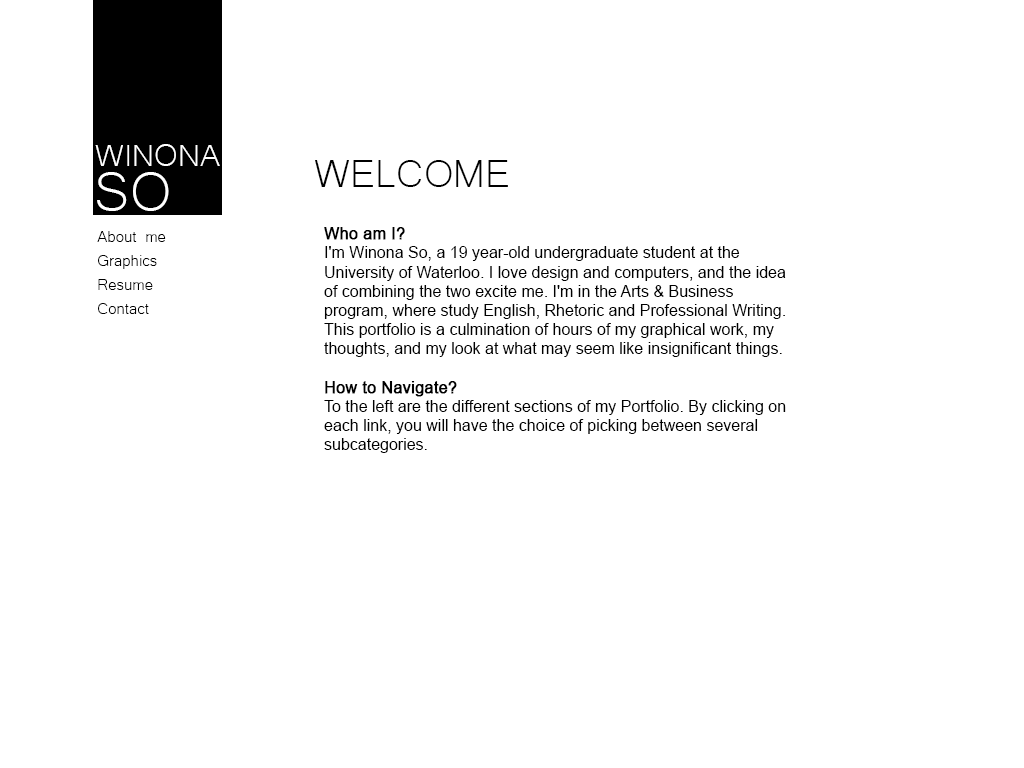
<style>
.page{position:relative;width:1024px;height:768px;background:#ffffff}
.page>*{position:absolute;margin:0}
.t1{font:40px "Microsoft-Yi-Baiti";color:#ffffff}
.t2{font:50px "Microsoft-Yi-Baiti";color:#000000}
.t3{font:70px "Microsoft-Yi-Baiti";color:#ffffff}
.t4{font:20px "Microsoft-Yi-Baiti";color:#000000}
.t5{font:16px "ArialMT";color:#000000}
.t6{font:16px "ArialMT";color:#000000;font-weight:bold}
</style>
<div class="page">
<p class="t1" style="left:95px;top:144px;width:125px;height:22px">WINONA</p>
<p class="t2" style="left:315px;top:160px;width:193px;height:27px">WELCOME</p>
<p class="t3" style="left:97px;top:172px;width:72px;height:39px">SO</p>
<p class="t4" style="left:97px;top:231px;width:69px;height:83px">About me<br>Graphics<br>Resume<br>Contact</p>
<p class="t5" style="left:324px;top:227px;width:462px;height:226px"><span class="t6">Who am I? <br></span>I'm Winona So, a 19 year-old undergraduate student at the University of Waterloo. I love design and computers, and the idea of combining the two excite me. I'm in the Arts &amp; Business program, where study English, Rhetoric and Professional Writing. This portfolio is a culmination of hours of my graphical work, my thoughts, and my look at what may seem like insignificant things.<br><br><span class="t6">How to Navigate? <br></span>To the left are the different sections of my Portfolio. By clicking on each link, you will have the choice of picking between several subcategories.</p>
</div>
